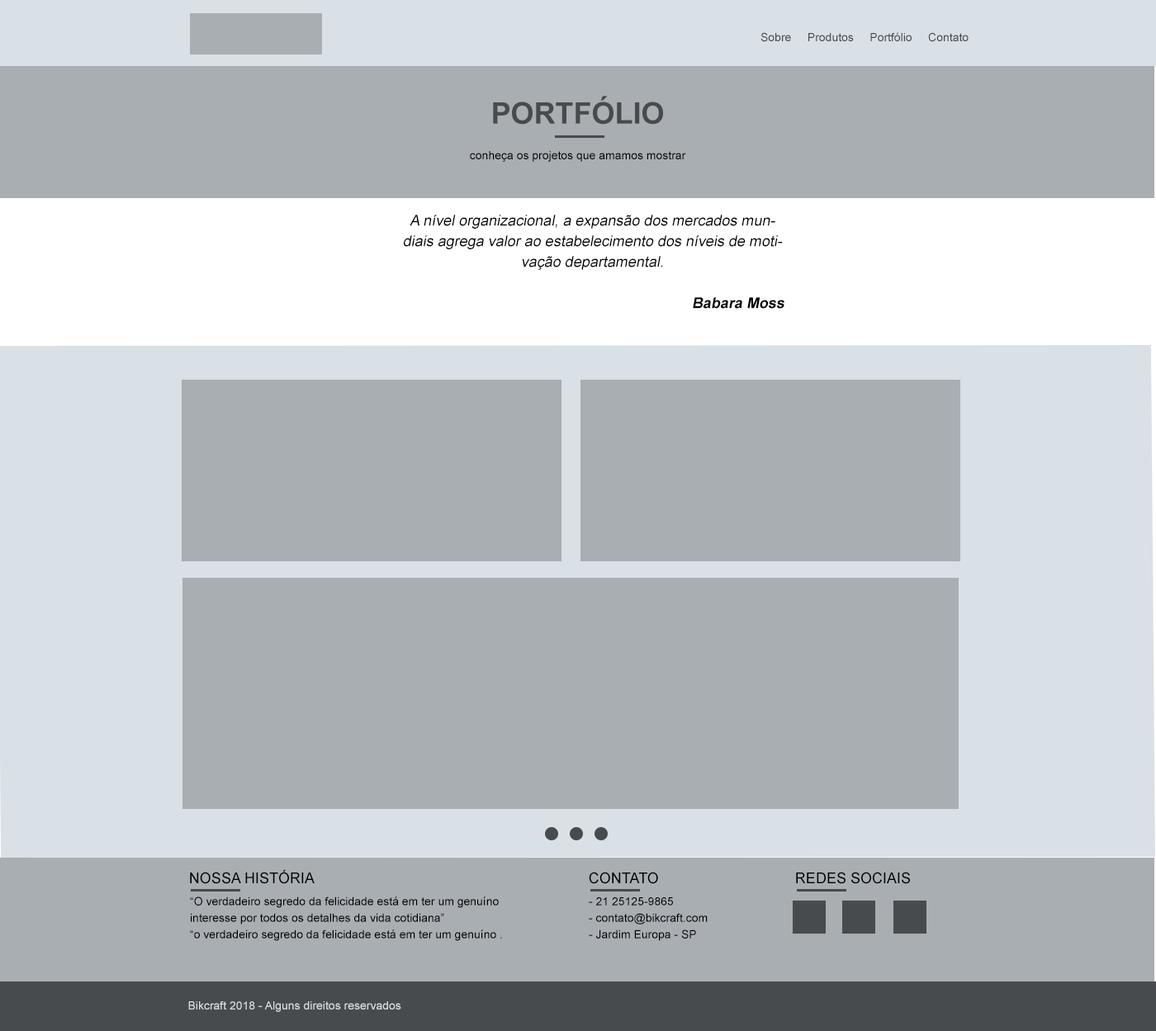
<style>
.page{position:relative;width:1156px;height:1031px;background:#a9aeb3}
.page>*{position:absolute;margin:0}
.t1{font:11.6px "ArialMT";color:#484b4d}
.t2{font:29.7px "Arial-BoldMT";color:#484b4d;text-transform:uppercase}
.t3{font:11.6px "ArialMT";color:#000000}
.t4{font:14.9px/20.6px "ArialMT";color:#000000;font-style:italic}
.t5{font:14.9px/20.6px "Arial-BoldMT";color:#000000;font-style:italic}
.t6{font:14.9px "ArialMT";color:#000000;text-transform:uppercase}
.t7{font:11.6px/16.5px "ArialMT";color:#000000}
.t8{font:11.6px "ArialMT";color:#d9e0e6}
</style>
<div class="page">
<p class="t1" style="left:761px;top:32px;width:208px;height:10px">Sobre     Produtos     Portfólio     Contato</p>
<p class="t2" style="left:493px;top:96px;width:170px;height:29px">portfólio</p>
<p class="t3" style="left:470px;top:151px;width:216px;height:11px">conheça os projetos que amamos mostrar</p>
<p class="t4" style="left:404px;top:215px;width:381px;height:94px;text-align:center">A nível organizacional, a expansão dos mercados mundiais agrega valor ao estabelecimento dos níveis de motivação departamental.<br><br><span class="t5">Babara Moss</span></p>
<p class="t6" style="left:190px;top:870px;width:125px;height:14px">Nossa História</p>
<p class="t6" style="left:589px;top:872px;width:69px;height:12px">contato</p>
<p class="t6" style="left:796px;top:872px;width:114px;height:12px">redes sociais</p>
<p class="t7" style="left:190px;top:897px;width:312px;height:44px">“O verdadeiro segredo da felicidade está em ter um genuíno interesse por todos os detalhes da vida cotidiana”<br>“o verdadeiro segredo da felicidade está em ter um genuíno .</p>
<p class="t7" style="left:589px;top:898px;width:119px;height:43px">- 21 25125-9865<br>- contato@bikcraft.com<br>- Jardim Europa - SP</p>
<p class="t8" style="left:188px;top:1002px;width:213px;height:10px">Bikcraft 2018 - Alguns direitos reservados</p>
</div>
